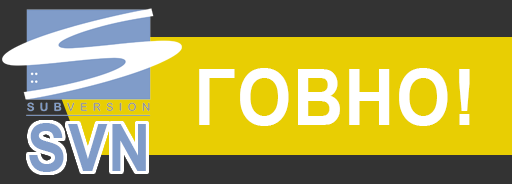
<style>
.page{position:relative;width:512px;height:184px;background:#e8ce03}
.page>*{position:absolute;margin:0}
.t1{font:78.2px "ArialNarrow-Bold";letter-spacing:0.013em;color:#ffffff;scale:1.09 1}
.t2{font:66px "ArialNarrow-Bold";letter-spacing:0.013em;color:#809cc9;scale:1.09 1}
</style>
<div class="page">
<p class="t1" style="left:199px;top:68px;width:271px;height:58px">!ГОВНО</p>
<p class="t2" style="left:29px;top:123px;width:117px;height:49px">SVN</p>
</div>
